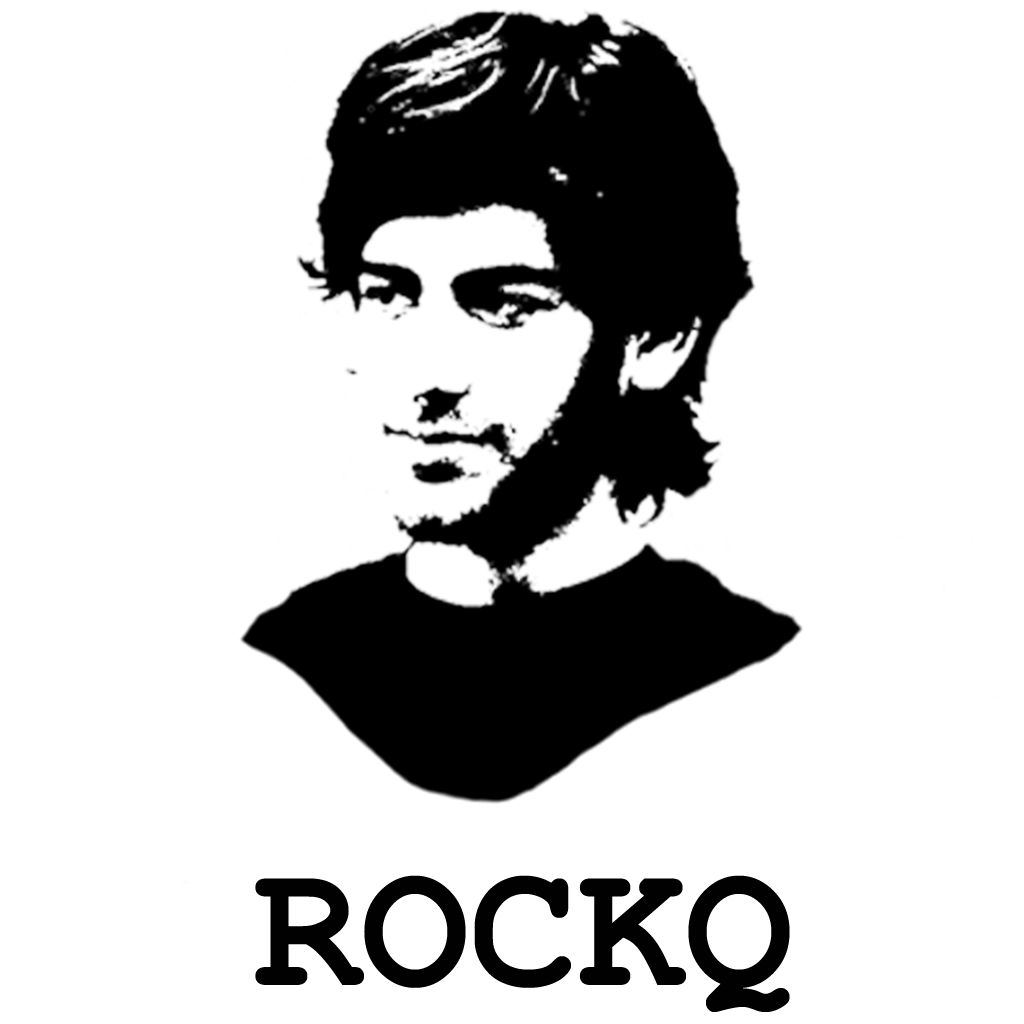
<style>
.page{position:relative;width:1024px;height:1024px;background:#ffffff}
.page>*{position:absolute;margin:0}
.t1{font:180px "CourierNewPS-BoldMT";color:#010101}
</style>
<div class="page">
<p class="t1" style="left:255px;top:875px;width:535px;height:137px">ROCKQ</p>
</div>
